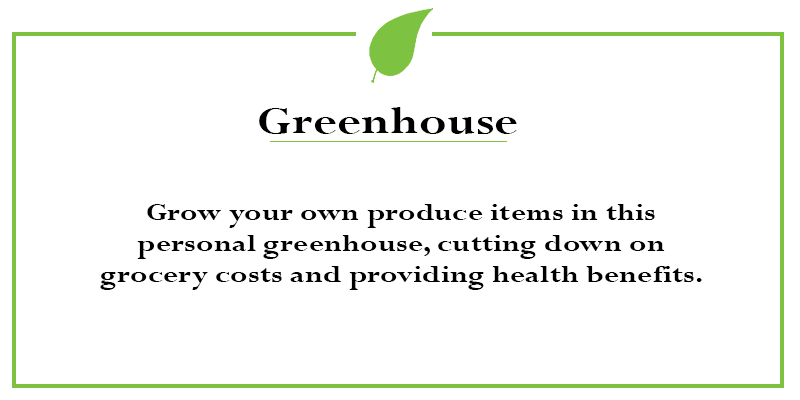
<style>
.page{position:relative;width:800px;height:400px;background:#ffffff}
.page>*{position:absolute;margin:0}
.t1{font:40.8px "Perpetua-Bold";color:#000000;scale:1.26 1}
.t2{font:25.6px "Perpetua-Bold";color:#000000;scale:1.26 1}
</style>
<div class="page">
<p class="t1" style="left:259px;top:107px;width:258px;height:27px">Greenhouse</p>
<p class="t2" style="left:100px;top:204px;width:602px;height:86px;text-align:center">Grow your own produce items in this personal greenhouse, cutting down on grocery costs and providing health benefits.</p>
</div>
